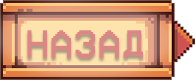
<style>
.page{position:relative;width:195px;height:80px}
.page>*{position:absolute;margin:0}
.t1{font:31.2px "VCROSDMonoRUSbyD";letter-spacing:0.02em;color:#dd8686;text-transform:uppercase}
</style>
<div class="page">
<p class="t1" style="left:27px;top:30px;width:116px;height:28px">назад</p>
</div>
